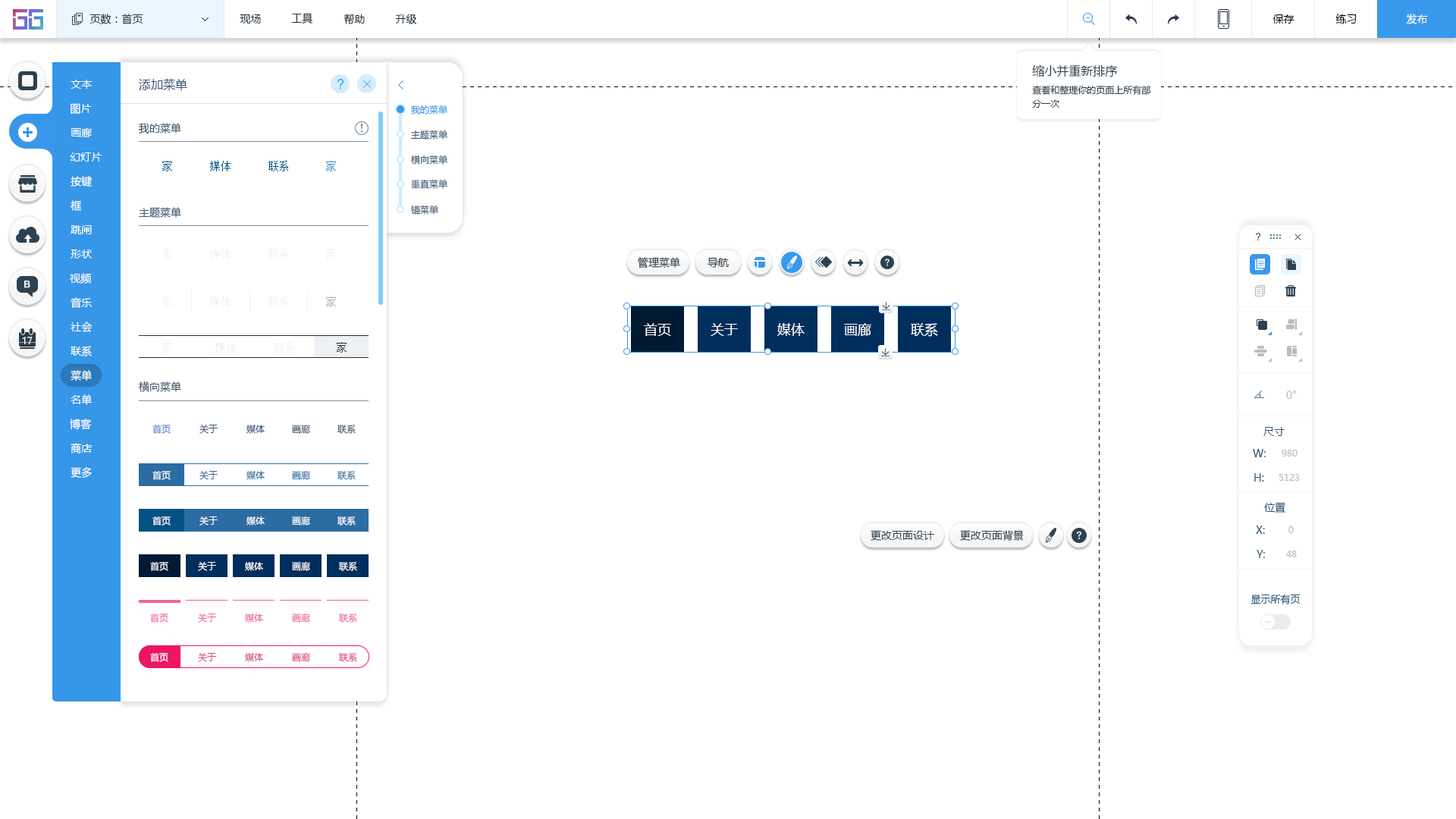
<style>
.page{position:relative;width:1456px;height:819px;background:#ffffff}
.page>*{position:absolute;margin:0}
.t1{font:10.6px "MicrosoftYaHei";color:#20303c}
.t2{font:10.6px "MicrosoftYaHei";color:#000000}
.t3{font:10.6px "MicrosoftYaHei";color:#ffffff}
.t4{font:12.1px "MicrosoftYaHei";color:#2a3f4d}
.t5{font:12.1px "MicrosoftYaHei";color:#395671}
.t6{font:9.1px/13.6px "MicrosoftYaHei";color:#2a3f4d}
.t7{font:9.1px "MicrosoftYaHei";color:#3696e8}
.t8{font:10.6px "MicrosoftYaHei";color:#395671}
.t9{font:9.1px "MicrosoftYaHei";color:#395671}
.t10{font:10.6px "SimSun";color:#045184}
.t11{font:10.6px "SimSun";color:#3588cc}
.t12{font:10.6px "SimSun";color:#edf1f5}
.t13{font:10.6px "MicrosoftYaHei";color:#2d4150}
.t14{font:10.6px "SimSun";color:#b0aaa9}
.t15{font:13.6px "MicrosoftYaHei";color:#ffffff}
.t16{font:10.6px "SimSun";color:#2f2e2e}
.t17{font:10.6px "MicrosoftYaHei";color:#bcbcbc}
.t18{font:9.1px "MicrosoftYaHei";color:#5488cd}
.t19{font:10.6px "MicrosoftYaHei";color:#2b5672}
.t20{font:9.1px "MicrosoftYaHei";color:#bcbcbc}
.t21{font:9.1px "MicrosoftYaHei";color:#ffffff}
.t22{font:9.1px "MicrosoftYaHei";color:#2b6ca3}
.t23{font:9.9px "MicrosoftYaHei";color:#2b5672}
.t24{font:9.1px "MicrosoftYaHei";color:#f26a8f}
.t25{font:9.1px "MicrosoftYaHei";color:#d64b77}
</style>
<div class="page">
<p class="t1" style="left:89px;top:14px;width:54px;height:11px">页数：首页</p>
<p class="t1" style="left:240px;top:14px;width:21px;height:10px">现场</p>
<p class="t1" style="left:291px;top:13px;width:22px;height:11px">工具</p>
<p class="t1" style="left:344px;top:14px;width:21px;height:11px">帮助</p>
<p class="t1" style="left:395px;top:14px;width:22px;height:10px">升级</p>
<p class="t2" style="left:1272px;top:14px;width:22px;height:10px">保存</p>
<p class="t2" style="left:1335px;top:14px;width:22px;height:10px">练习</p>
<p class="t3" style="left:1406px;top:14px;width:22px;height:10px">发布</p>
<p class="t4" style="left:1032px;top:64px;width:86px;height:13px">缩小并重新排序</p>
<p class="t3" style="left:71px;top:80px;width:21px;height:9px">文本</p>
<p class="t5" style="left:139px;top:78px;width:48px;height:13px">添加菜单</p>
<p class="t6" style="left:1032px;top:85px;width:119px;height:23px">查看和整理你的页面上所有部<br>分一次</p>
<p class="t3" style="left:71px;top:103px;width:21px;height:12px">图片</p>
<p class="t7" style="left:411px;top:105px;width:37px;height:10px">我的菜单</p>
<p class="t8" style="left:138px;top:123px;width:43px;height:11px">我的菜单</p>
<p class="t3" style="left:71px;top:128px;width:22px;height:9px">画廊</p>
<p class="t9" style="left:411px;top:130px;width:37px;height:10px">主题菜单</p>
<p class="t3" style="left:70px;top:152px;width:32px;height:10px">幻灯片</p>
<p class="t10" style="left:162px;top:161px;width:10px;height:10px">家</p>
<p class="t10" style="left:210px;top:161px;width:21px;height:10px">媒体</p>
<p class="t10" style="left:268px;top:161px;width:20px;height:10px">联系</p>
<p class="t11" style="left:326px;top:161px;width:10px;height:10px">家</p>
<p class="t9" style="left:410px;top:155px;width:38px;height:10px">横向菜单</p>
<p class="t3" style="left:71px;top:176px;width:21px;height:11px">按键</p>
<p class="t9" style="left:411px;top:179px;width:37px;height:10px">垂直菜单</p>
<p class="t3" style="left:71px;top:200px;width:11px;height:11px">框</p>
<p class="t8" style="left:139px;top:207px;width:42px;height:11px">主题菜单</p>
<p class="t9" style="left:411px;top:205px;width:28px;height:10px">锚菜单</p>
<p class="t3" style="left:71px;top:225px;width:21px;height:9px">跳闸</p>
<p class="t3" style="left:71px;top:249px;width:22px;height:10px">形状</p>
<p class="t12" style="left:162px;top:249px;width:10px;height:10px">家</p>
<p class="t12" style="left:210px;top:249px;width:21px;height:10px">媒体</p>
<p class="t12" style="left:268px;top:249px;width:20px;height:10px">联系</p>
<p class="t12" style="left:326px;top:249px;width:10px;height:10px">家</p>
<p class="t13" style="left:638px;top:257px;width:42px;height:11px">管理菜单</p>
<p class="t13" style="left:708px;top:257px;width:21px;height:11px">导航</p>
<p class="t3" style="left:70px;top:273px;width:22px;height:11px">视频</p>
<p class="t3" style="left:71px;top:297px;width:21px;height:11px">音乐</p>
<p class="t12" style="left:162px;top:297px;width:10px;height:10px">家</p>
<p class="t12" style="left:210px;top:297px;width:21px;height:10px">媒体</p>
<p class="t12" style="left:268px;top:297px;width:20px;height:10px">联系</p>
<p class="t14" style="left:326px;top:297px;width:10px;height:10px">家</p>
<p class="t3" style="left:71px;top:322px;width:22px;height:10px">社会</p>
<p class="t15" style="left:644px;top:323px;width:27px;height:13px">首页</p>
<p class="t15" style="left:711px;top:323px;width:27px;height:13px">关于</p>
<p class="t15" style="left:777px;top:323px;width:28px;height:13px">媒体</p>
<p class="t15" style="left:844px;top:323px;width:27px;height:13px">画廊</p>
<p class="t15" style="left:911px;top:323px;width:27px;height:14px">联系</p>
<p class="t3" style="left:71px;top:346px;width:21px;height:10px">联系</p>
<p class="t12" style="left:162px;top:342px;width:10px;height:11px">家</p>
<p class="t12" style="left:215px;top:342px;width:21px;height:11px">媒体</p>
<p class="t12" style="left:275px;top:342px;width:19px;height:11px">联系</p>
<p class="t16" style="left:337px;top:342px;width:10px;height:11px">家</p>
<p class="t3" style="left:71px;top:370px;width:21px;height:11px">菜单</p>
<p class="t8" style="left:138px;top:381px;width:43px;height:12px">横向菜单</p>
<p class="t3" style="left:71px;top:394px;width:21px;height:11px">名单</p>
<p class="t17" style="left:1286px;top:391px;width:11px;height:8px">0°</p>
<p class="t3" style="left:70px;top:419px;width:22px;height:11px">博客</p>
<p class="t18" style="left:152px;top:425px;width:19px;height:9px">首页</p>
<p class="t9" style="left:199px;top:425px;width:19px;height:9px">关于</p>
<p class="t9" style="left:246px;top:425px;width:19px;height:9px">媒体</p>
<p class="t9" style="left:292px;top:425px;width:18px;height:9px">画廊</p>
<p class="t9" style="left:337px;top:425px;width:19px;height:9px">联系</p>
<p class="t19" style="left:1263px;top:427px;width:22px;height:9px">尺寸</p>
<p class="t3" style="left:71px;top:443px;width:22px;height:10px">商店</p>
<p class="t19" style="left:1253px;top:449px;width:13px;height:8px">W:</p>
<p class="t20" style="left:1282px;top:450px;width:15px;height:7px">980</p>
<p class="t3" style="left:71px;top:467px;width:21px;height:12px">更多</p>
<p class="t21" style="left:152px;top:471px;width:19px;height:9px">首页</p>
<p class="t22" style="left:199px;top:471px;width:19px;height:9px">关于</p>
<p class="t22" style="left:246px;top:471px;width:19px;height:9px">媒体</p>
<p class="t22" style="left:292px;top:471px;width:18px;height:9px">画廊</p>
<p class="t22" style="left:337px;top:471px;width:19px;height:9px">联系</p>
<p class="t19" style="left:1254px;top:473px;width:10px;height:9px">H:</p>
<p class="t20" style="left:1279px;top:474px;width:21px;height:7px">5123</p>
<p class="t19" style="left:1264px;top:502px;width:22px;height:11px">位置</p>
<p class="t21" style="left:152px;top:516px;width:19px;height:10px">首页</p>
<p class="t21" style="left:199px;top:516px;width:19px;height:10px">关于</p>
<p class="t21" style="left:246px;top:516px;width:19px;height:10px">媒体</p>
<p class="t21" style="left:292px;top:516px;width:18px;height:10px">画廊</p>
<p class="t21" style="left:337px;top:516px;width:19px;height:10px">联系</p>
<p class="t13" style="left:871px;top:530px;width:63px;height:11px">更改页面设计</p>
<p class="t13" style="left:960px;top:530px;width:64px;height:11px">更改页面背景</p>
<p class="t19" style="left:1256px;top:526px;width:9px;height:8px">X:</p>
<p class="t20" style="left:1288px;top:526px;width:6px;height:7px">0</p>
<p class="t19" style="left:1257px;top:550px;width:8px;height:8px">Y:</p>
<p class="t20" style="left:1286px;top:551px;width:11px;height:6px">48</p>
<p class="t21" style="left:150px;top:562px;width:18px;height:9px">首页</p>
<p class="t21" style="left:198px;top:562px;width:18px;height:9px">关于</p>
<p class="t21" style="left:245px;top:562px;width:18px;height:9px">媒体</p>
<p class="t21" style="left:292px;top:562px;width:18px;height:9px">画廊</p>
<p class="t21" style="left:338px;top:562px;width:19px;height:9px">联系</p>
<p class="t23" style="left:1250px;top:594px;width:51px;height:10px">显示所有页</p>
<p class="t24" style="left:150px;top:613px;width:18px;height:10px">首页</p>
<p class="t24" style="left:198px;top:613px;width:18px;height:10px">关于</p>
<p class="t24" style="left:245px;top:613px;width:18px;height:10px">媒体</p>
<p class="t24" style="left:292px;top:613px;width:18px;height:10px">画廊</p>
<p class="t24" style="left:338px;top:613px;width:19px;height:10px">联系</p>
<p class="t21" style="left:150px;top:653px;width:18px;height:9px">首页</p>
<p class="t25" style="left:198px;top:653px;width:18px;height:9px">关于</p>
<p class="t25" style="left:245px;top:653px;width:18px;height:9px">媒体</p>
<p class="t25" style="left:292px;top:653px;width:18px;height:9px">画廊</p>
<p class="t25" style="left:338px;top:653px;width:19px;height:9px">联系</p>
</div>
